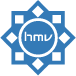
<style>
.page{position:relative;width:76px;height:76px;background:#ffffff}
.page>*{position:absolute;margin:0}
.t1{font:12.6px "Audiowide-Regular";color:#ffffff}
</style>
<div class="page">
<p class="t1" style="left:24px;top:31px;width:29px;height:11px">hmv</p>
</div>
